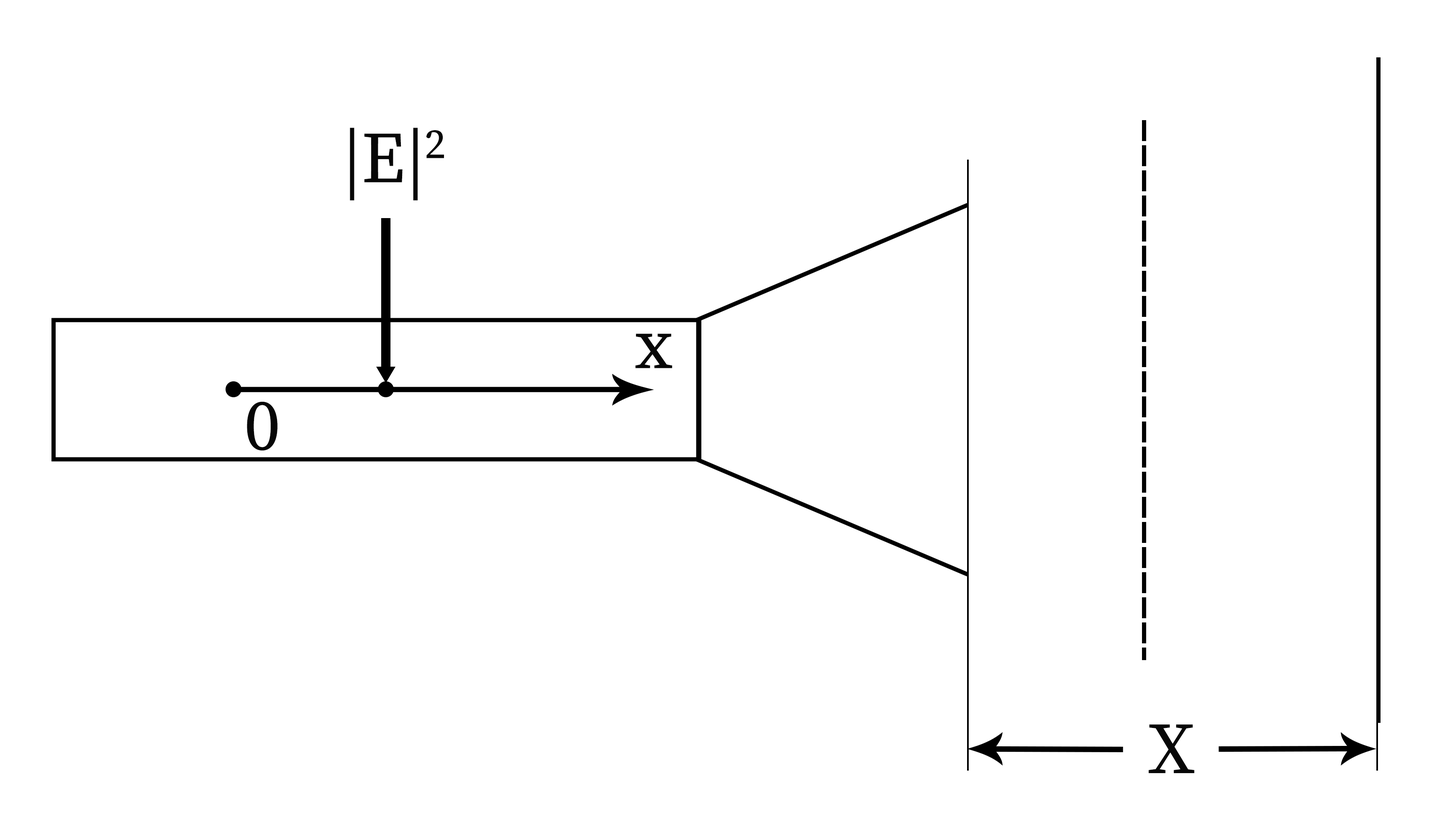
<style>
.page{position:relative;width:1455px;height:820px;background:#ffffff}
.page>*{position:absolute;margin:0}
.t1{font:72.4px "SourceSerifRoman-Regular";color:#070707}
.t2{font:72.4px "SourceSerifRoman-Regular";letter-spacing:-0.05em;color:#070707}
</style>
<div class="page">
<p class="t1" style="left:350px;top:128px;width:94px;height:72px">|E|2</p>
<p class="t2" style="left:635px;top:333px;width:37px;height:35px">x</p>
<p class="t2" style="left:247px;top:401px;width:30px;height:50px">0</p>
<p class="t2" style="left:1149px;top:724px;width:45px;height:49px">X</p>
</div>
